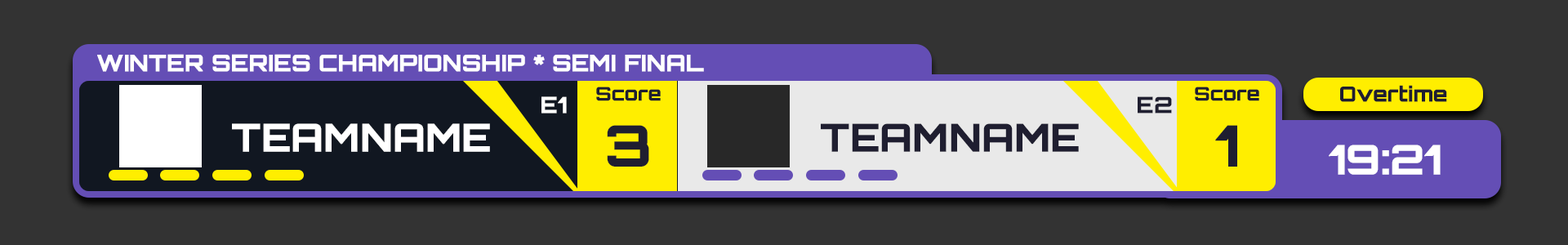
<style>
.page{position:relative;width:1568px;height:245px;background:#333333}
.page>*{position:absolute;margin:0}
.t1{font:22.7px "Orbitron-Bold";color:#ffffff;font-weight:bold}
.t2{font:18.7px "Orbitron-Bold";color:#1f1e30;font-weight:bold}
.t3{font:20.4px "Orbitron-Bold";color:#1f1e30;font-weight:bold}
.t4{font:21.9px "Orbitron-Bold";color:#ffffff;font-weight:bold}
.t5{font:21.9px "Orbitron-Bold";color:#1f1e30;font-weight:bold}
.t6{font:37.9px "Orbitron-Bold";color:#ffffff;font-weight:bold}
.t7{font:56px "Orbitron-Bold";color:#1f1e30;font-weight:bold}
.t8{font:37.9px "Orbitron-Bold";color:#1f1e30;font-weight:bold}
.t9{font:40.3px "Orbitron-Bold";color:#ffffff;font-weight:bold}
</style>
<div class="page">
<p class="t1" style="left:97px;top:54px;width:607px;height:18px">WINTER SERIES CHAMPIONSHIP * SEMI FINAL</p>
<p class="t2" style="left:596px;top:87px;width:65px;height:14px">Score</p>
<p class="t2" style="left:1195px;top:87px;width:64px;height:14px">Score</p>
<p class="t3" style="left:1340px;top:85px;width:107px;height:17px">Overtime</p>
<p class="t4" style="left:541px;top:96px;width:26px;height:18px">E1</p>
<p class="t5" style="left:1138px;top:96px;width:34px;height:18px">E2</p>
<p class="t6" style="left:232px;top:123px;width:258px;height:29px">TEAMNAME</p>
<p class="t7" style="left:607px;top:125px;width:42px;height:42px">3</p>
<p class="t8" style="left:821px;top:123px;width:258px;height:29px">TEAMNAME</p>
<p class="t7" style="left:1215px;top:125px;width:22px;height:42px">1</p>
<p class="t9" style="left:1329px;top:145px;width:112px;height:30px">19:21</p>
</div>
